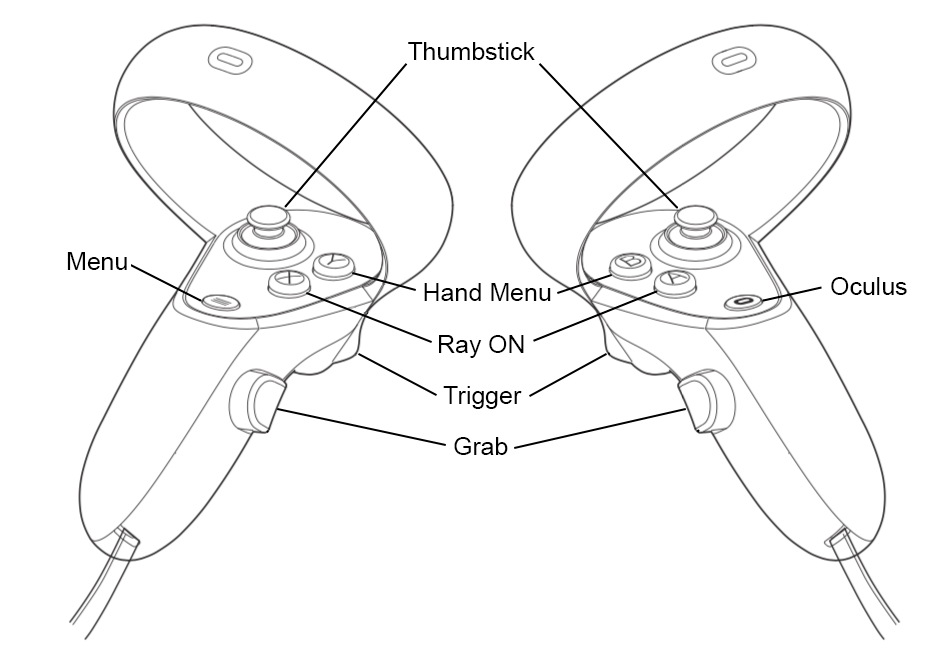
<style>
.page{position:relative;width:935px;height:656px;background:#ffffff}
.page>*{position:absolute;margin:0}
.t1{font:25px "ArialMT";color:#000000}
</style>
<div class="page">
<p class="t1" style="left:408px;top:42px;width:127px;height:18px">Thumbstick</p>
<p class="t1" style="left:67px;top:252px;width:60px;height:18px">Menu</p>
<p class="t1" style="left:831px;top:277px;width:76px;height:18px">Oculus</p>
<p class="t1" style="left:424px;top:283px;width:127px;height:18px">Hand Menu</p>
<p class="t1" style="left:439px;top:335px;width:85px;height:23px">Ray ON</p>
<p class="t1" style="left:443px;top:386px;width:79px;height:23px">Trigger</p>
<p class="t1" style="left:454px;top:437px;width:54px;height:18px">Grab</p>
</div>
